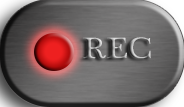
<style>
.page{position:relative;width:184px;height:107px}
.page>*{position:absolute;margin:0}
.t1{font:30px "PlantagenetCherokee";letter-spacing:-0.005em;scale:1.2 1}
</style>
<div class="page">
<p class="t1" style="left:83px;top:37px;width:68px;height:22px">REC</p>
</div>
